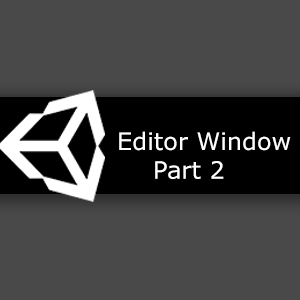
<style>
.page{position:relative;width:300px;height:300px;background:#494949}
.page>*{position:absolute;margin:0}
.t1{font:24px "Verdana";color:#ffffff}
</style>
<div class="page">
<p class="t1" style="left:119px;top:131px;width:172px;height:48px">Editor Window<br> Part 2</p>
</div>
